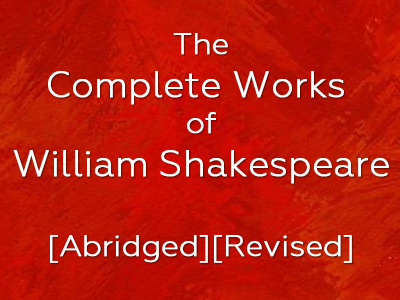
<style>
.page{position:relative;width:400px;height:300px}
.page>*{position:absolute;margin:0}
.t1{font:36px "Geometria-Light";color:#ffffff;font-weight:bold}
.t2{font:30px "Geometria-Light";color:#ffffff;font-weight:bold}
</style>
<div class="page">
<p class="t1" style="left:13px;top:33px;width:376px;height:230px;text-align:center"><span class="t2">The<br></span>Complete Works <br><span class="t2">of<br></span>William Shakespeare<br><br><span class="t2">[Abridged][Revised]</span></p>
</div>
